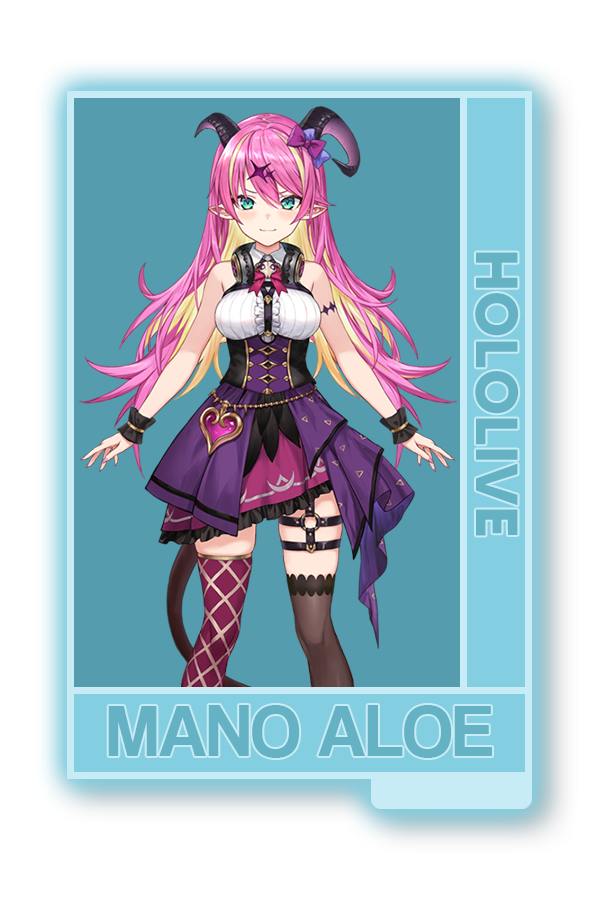
<style>
.page{position:relative;width:600px;height:900px;background:#549cae}
.page>*{position:absolute;margin:0}
.t1{font:59.2px "MADETOMMY-Bold";color:#66b2c5}
.t2{font:74.4px "CoolveticaRg-Regular";color:#66b2c5}
</style>
<div class="page">
<p class="t1" style="left:475px;top:252px;width:44px;height:284px;rotate:90deg">HOLOLIVE</p>
<p class="t2" style="left:108px;top:705px;width:384px;height:53px">MANO ALOE</p>
</div>
